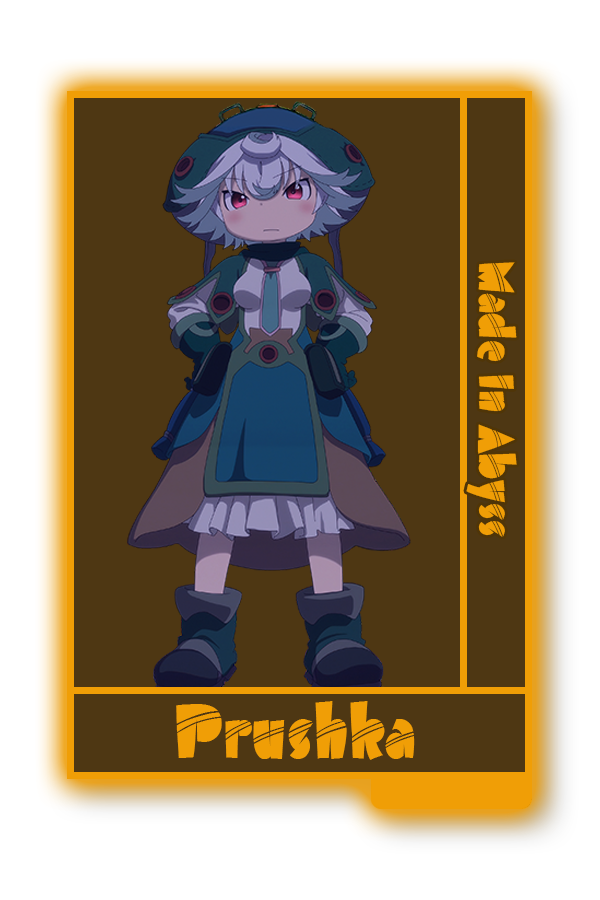
<style>
.page{position:relative;width:600px;height:900px;background:#4e3713}
.page>*{position:absolute;margin:0}
.t1{font:48.8px "AirmoleStripe";color:#f09e06}
.t2{font:75px "AirmoleStripe";color:#f09e06}
</style>
<div class="page">
<p class="t1" style="left:466px;top:262px;width:51px;height:275px;rotate:90deg">Made In Abyss</p>
<p class="t2" style="left:176px;top:701px;width:239px;height:59px">Prushka</p>
</div>
